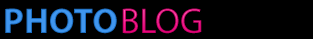
<style>
.page{position:relative;width:313px;height:39px;background:#000000}
.page>*{position:absolute;margin:0}
.t1{font:36px "MyriadPro-Bold"}
.t2{font:36px "MyriadPro-Regular"}
</style>
<div class="page">
<p class="t1" style="left:5px;top:8px;width:112px;height:26px">PHOTO</p>
<p class="t2" style="left:122px;top:8px;width:80px;height:26px">BLOG</p>
</div>
